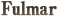
<style>
.page{position:relative;width:67px;height:16px;background:#ffffff}
.page>*{position:absolute;margin:0}
.t1{font:18px "RyuminPro-ExBold";letter-spacing:-0.06em;color:#4a3f32;font-weight:bold;scale:0.9 1}
</style>
<div class="page">
<p class="t1" style="left:1px;top:1px;width:56px;height:15px">Fulmar</p>
</div>
